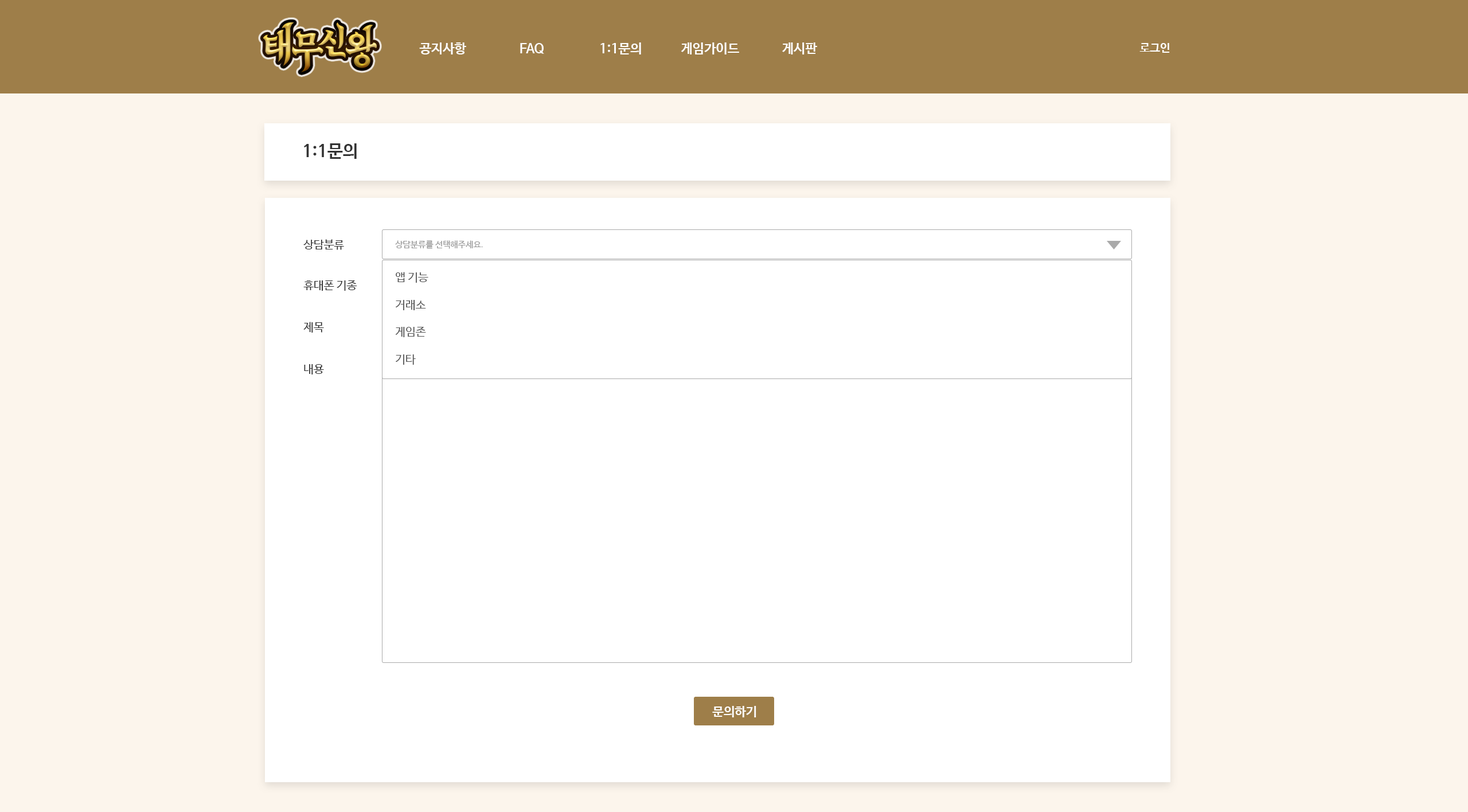
<style>
.page{position:relative;width:1468px;height:812px;background:#ffffff}
.page>*{position:absolute;margin:0}
.t1{font:13.2px "NanumBarunGothicBold";color:#ffffff;text-transform:uppercase}
.t2{font:11.5px "NanumBarunGothicBold";color:#ffffff;text-transform:uppercase}
.t3{font:17.2px "NanumBarunGothicBold";color:#333333;text-transform:uppercase}
.t4{font:11.5px "NanumBarunGothic";color:#333333;text-transform:uppercase}
.t5{font:8.6px "NanumBarunGothic";color:#999999;text-transform:uppercase}
.t6{font:11.5px "NanumBarunGothic";color:#555555;text-transform:uppercase}
.t7{font:12.6px "NanumBarunGothicBold";color:#ffffff;text-transform:uppercase}
</style>
<div class="page">
<p class="t1" style="left:419px;top:42px;width:47px;height:12px">공지사항</p>
<p class="t1" style="left:520px;top:43px;width:24px;height:11px">faq</p>
<p class="t1" style="left:600px;top:42px;width:41px;height:12px">1:1문의</p>
<p class="t1" style="left:681px;top:42px;width:58px;height:12px">게임가이드</p>
<p class="t1" style="left:782px;top:42px;width:35px;height:12px">게시판</p>
<p class="t2" style="left:1140px;top:43px;width:30px;height:10px">로그인</p>
<p class="t3" style="left:304px;top:143px;width:53px;height:16px">1:1문의</p>
<p class="t4" style="left:303px;top:239px;width:41px;height:11px">상담분류</p>
<p class="t5" style="left:395px;top:240px;width:88px;height:9px">상담분류를 선택해주세요.</p>
<p class="t4" style="left:303px;top:280px;width:54px;height:11px">휴대폰 기종</p>
<p class="t6" style="left:396px;top:272px;width:32px;height:11px">앱 기능</p>
<p class="t6" style="left:395px;top:300px;width:31px;height:10px">거래소</p>
<p class="t4" style="left:303px;top:322px;width:21px;height:11px">제목</p>
<p class="t6" style="left:395px;top:327px;width:31px;height:10px">게임존</p>
<p class="t4" style="left:304px;top:364px;width:20px;height:11px">내용</p>
<p class="t6" style="left:396px;top:354px;width:20px;height:11px">기타</p>
<p class="t7" style="left:712px;top:706px;width:45px;height:12px">문의하기</p>
</div>
